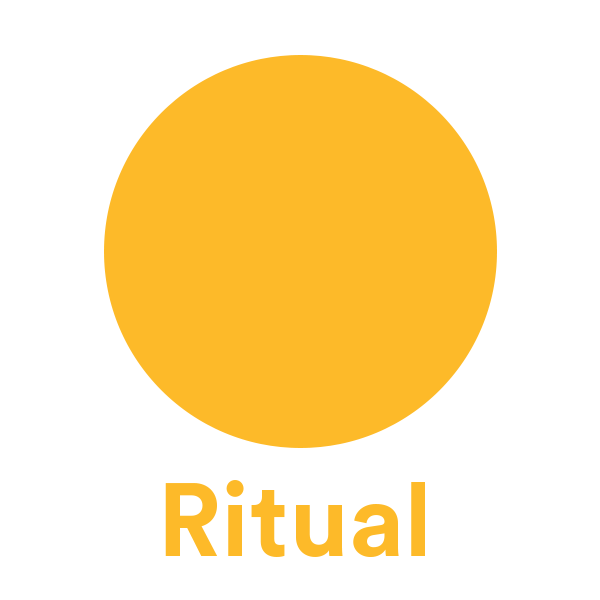
<style>
.page{position:relative;width:600px;height:600px;background:#ffffff}
.page>*{position:absolute;margin:0}
.t1{font:103px "CircularStd-Bold";color:#fdba29}
</style>
<div class="page">
<p class="t1" style="left:165px;top:480px;width:260px;height:77px">Ritual</p>
</div>
